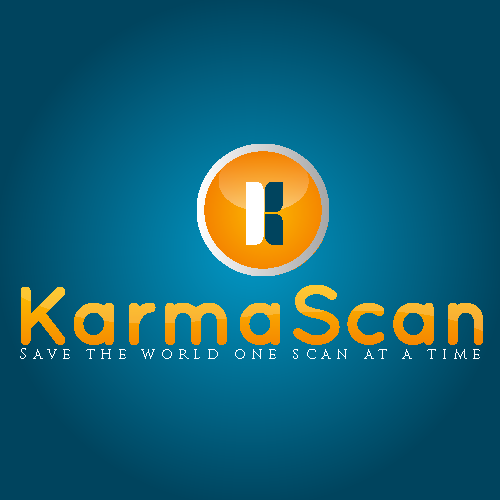
<style>
.page{position:relative;width:500px;height:500px}
.page>*{position:absolute;margin:0}
.t1{font:14.5px "TrajanPro-Regular";letter-spacing:0.386em;color:#ffffff}
</style>
<div class="page">
<p class="t1" style="left:20px;top:348px;width:460px;height:11px">Save the world one scan at a time</p>
</div>
